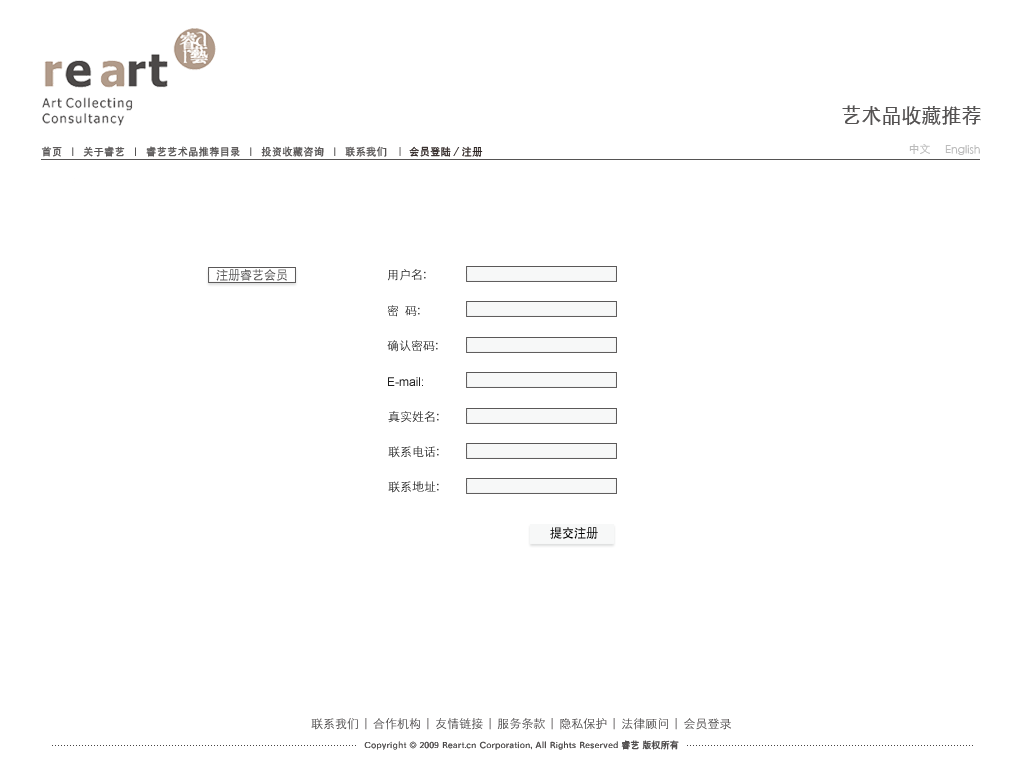
<style>
.page{position:relative;width:1024px;height:768px;background:#ffffff}
.page>*{position:absolute;margin:0}
.t1{font:20px "SIL-Hei-Med-Jian";color:#595757}
.t2{font:10px "SIL-Hei-Med-Jian";letter-spacing:0.05em;color:#5a5858}
.t3{font:10px "SIL-Hei-Med-Jian";letter-spacing:0.05em;color:#231815}
.t4{font:11px "STXihei";color:#bfbfbf}
.t5{font:12px "SIL-Hei-Med-Jian";color:#5a5858}
.t6{font:12px "STXihei"}
.t7{font:12px "ArialMT";color:#1e1e1e}
.t8{font:12px "STXihei";color:#1e1e1e}
.t9{font:12px "SIL-Hei-Med-Jian";color:#000000}
</style>
<div class="page">
<p class="t1" style="left:842px;top:105px;width:139px;height:20px">艺术品收藏推荐</p>
<p class="t2" style="left:41px;top:146px;width:442px;height:11px">首页  |  关于睿艺  |  睿艺艺术品推荐目录  |  投资收藏咨询  |  联系我们  ｜ <span class="t3">会员登陆／注册</span></p>
<p class="t4" style="left:909px;top:144px;width:21px;height:10px">中文</p>
<p class="t4" style="left:945px;top:145px;width:35px;height:10px">English</p>
<p class="t5" style="left:216px;top:269px;width:71px;height:12px">注册睿艺会员</p>
<p class="t6" style="left:388px;top:269px;width:38px;height:12px">用户名:</p>
<p class="t6" style="left:387px;top:305px;width:33px;height:12px">密  码:</p>
<p class="t6" style="left:387px;top:340px;width:51px;height:12px">确认密码:</p>
<p class="t7" style="left:388px;top:377px;width:35px;height:9px">E-mail:</p>
<p class="t6" style="left:388px;top:411px;width:51px;height:12px">真实姓名:</p>
<p class="t8" style="left:388px;top:446px;width:51px;height:12px">联系电话:</p>
<p class="t8" style="left:388px;top:481px;width:51px;height:12px">联系地址:</p>
<p class="t9" style="left:550px;top:527px;width:48px;height:12px">提交注册</p>
</div>
